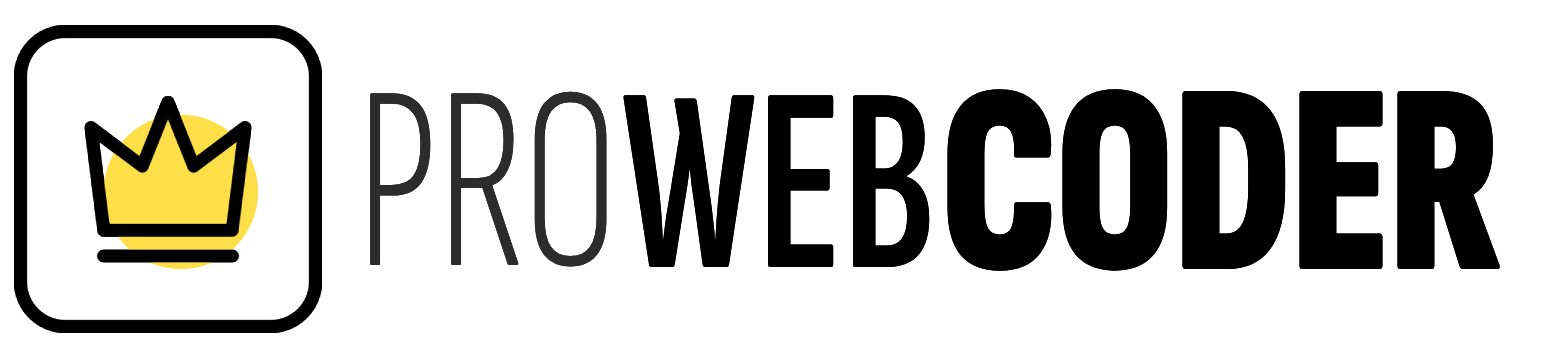
<style>
.page{position:relative;width:1556px;height:356px;background:#ffffff}
.page>*{position:absolute;margin:0}
.t1{font:271.8px "SofiaSansExtraCondensed-Black";color:#000000;scale:0.92 1}
.t2{font:262.2px "SofiaSansExtraCondensed-Light";color:#2c2c2c;scale:0.92 1}
.t3{font:262.2px "SofiaSansExtraCondensed-SemiBold";color:#000000;scale:0.92 1}
</style>
<div class="page">
<p class="t1" style="left:947px;top:89px;width:553px;height:182px">CODER</p>
<p class="t1" style="left:947px;top:89px;width:553px;height:182px">CODER</p>
<p class="t2" style="left:370px;top:91px;width:237px;height:176px">PRO</p>
<p class="t2" style="left:370px;top:91px;width:237px;height:176px">PRO</p>
<p class="t3" style="left:623px;top:95px;width:307px;height:172px">WEB</p>
<p class="t3" style="left:623px;top:95px;width:307px;height:172px">WEB</p>
</div>
